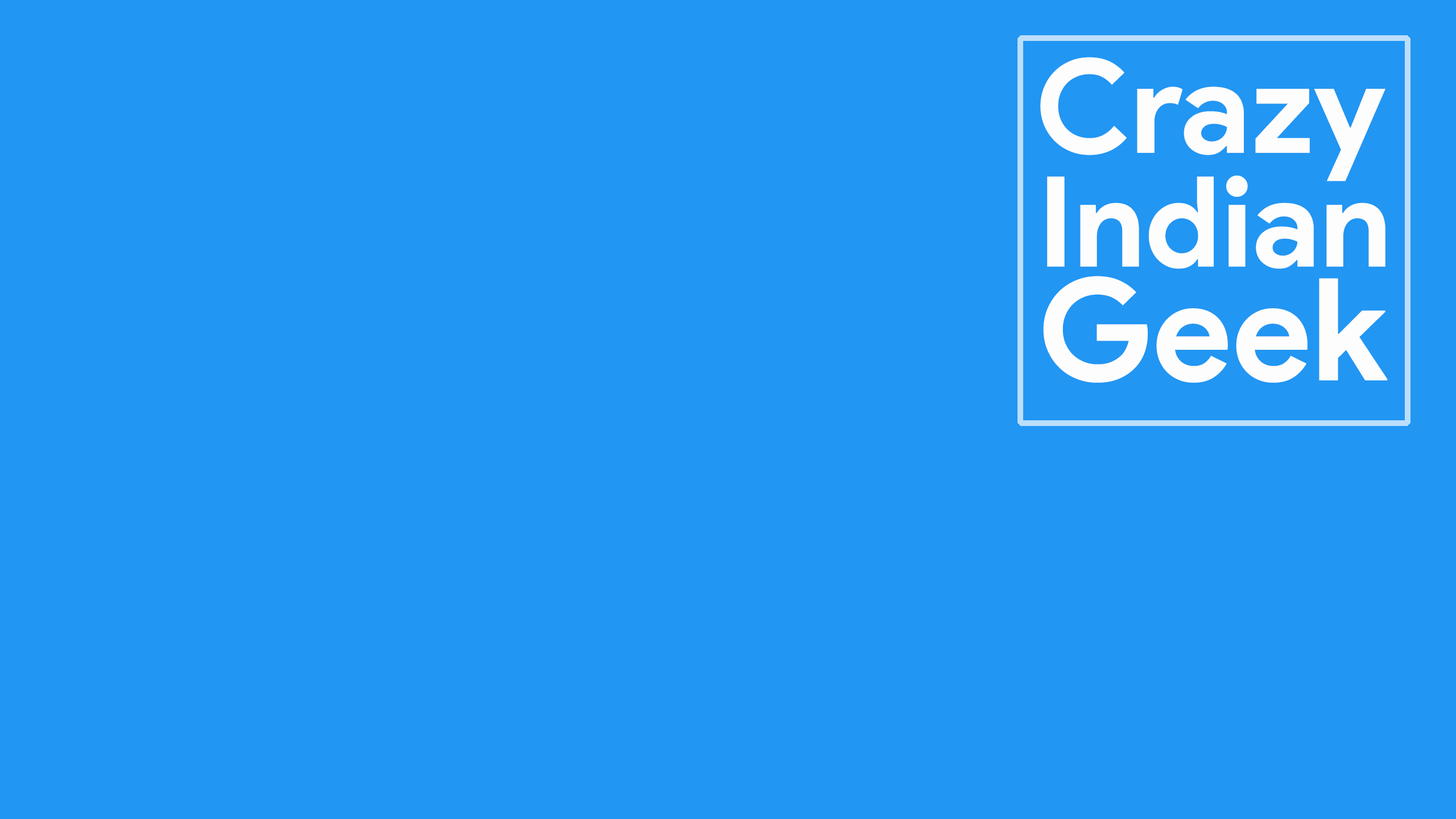
<style>
.page{position:relative;width:1456px;height:819px;background:#2196f3}
.page>*{position:absolute;margin:0}
.t1{font:125.6px/113.8px "ProductSans-Bold";color:#fefdfd}
.t2{font:130.4px/113.8px "ProductSans-Bold";color:#fefdfd}
.t3{font:142.2px/113.8px "ProductSans-Bold";color:#fefdfd}
</style>
<div class="page">
<p class="t1" style="left:1040px;top:57px;width:348px;height:326px"><span class="t2">Crazy<br></span>Indian<br><span class="t3">Geek</span></p>
</div>
